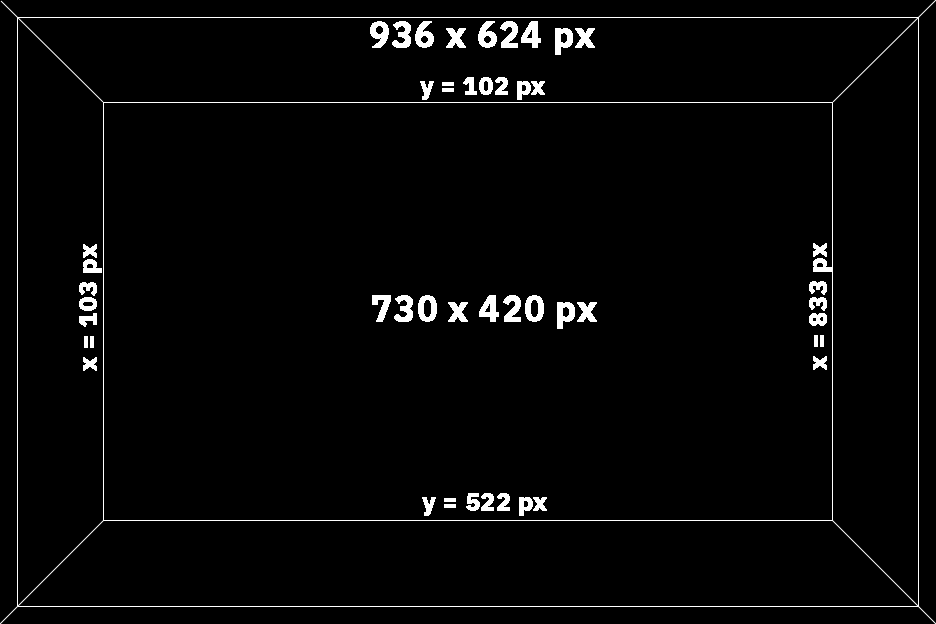
<style>
.page{position:relative;width:936px;height:624px;background:#000000}
.page>*{position:absolute;margin:0}
.t1{font:36px "IBMPlexSans-Bold";color:#ffffff;font-weight:bold}
.t2{font:24px "IBMPlexSans-Bold";color:#ffffff;font-weight:bold}
</style>
<div class="page">
<p class="t1" style="left:370px;top:21px;width:225px;height:34px">936 x 624 px</p>
<p class="t2" style="left:420px;top:77px;width:125px;height:23px">y = 102 px</p>
<p class="t2" style="left:79px;top:244px;width:23px;height:127px;rotate:-90deg">x = 103 px</p>
<p class="t2" style="left:809px;top:243px;width:23px;height:127px;rotate:-90deg">x = 833 px</p>
<p class="t1" style="left:372px;top:295px;width:225px;height:34px">730 x 420 px</p>
<p class="t2" style="left:422px;top:493px;width:125px;height:23px">y = 522 px</p>
</div>
